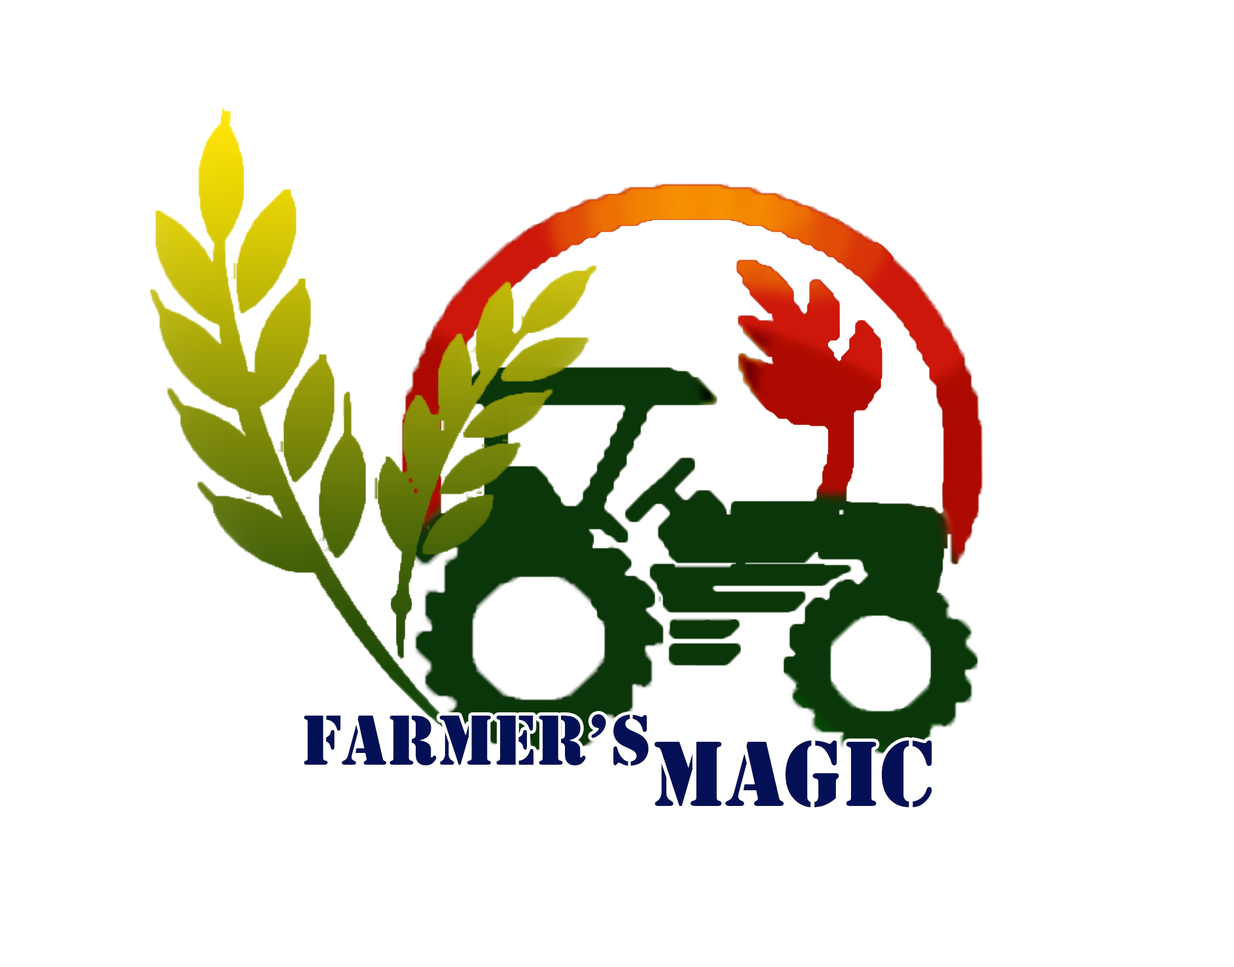
<style>
.page{position:relative;width:1234px;height:967px;background:#ffffff}
.page>*{position:absolute;margin:0}
.t1{font:73.8px "Stencil";color:#041055}
.t2{font:96.5px "Stencil";color:#041055}
</style>
<div class="page">
<p class="t1" style="left:304px;top:714px;width:345px;height:52px">Farmer’s</p>
<p class="t2" style="left:654px;top:740px;width:278px;height:67px">Magic</p>
</div>
